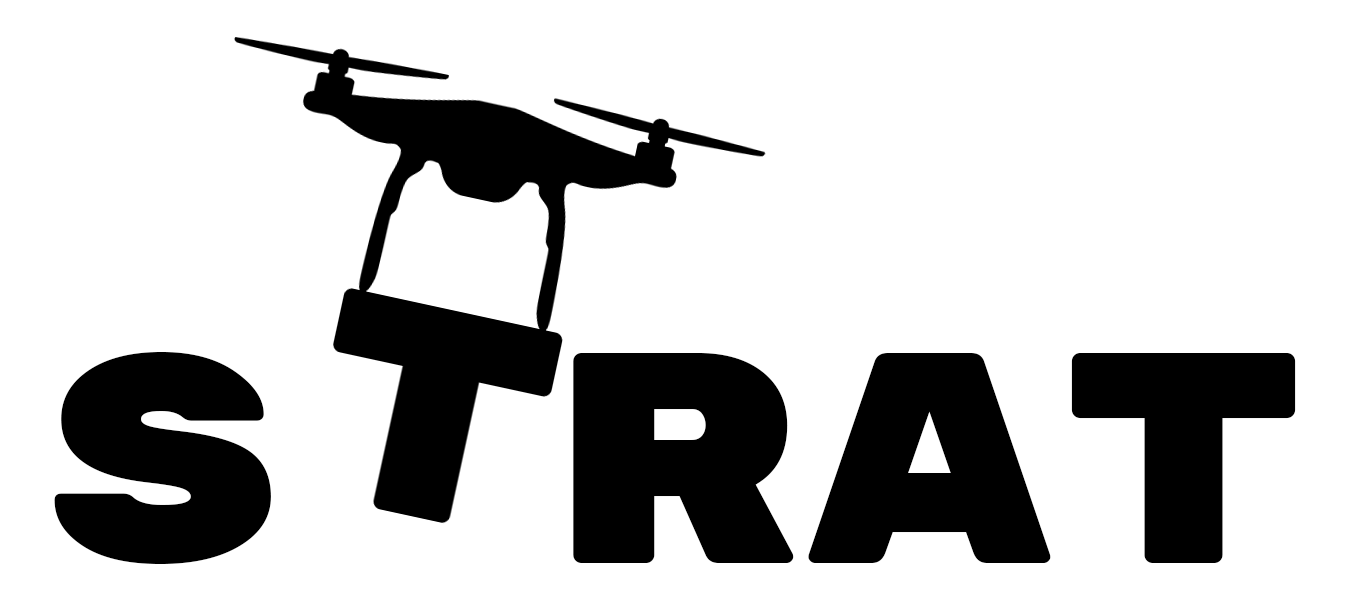
<style>
.page{position:relative;width:1350px;height:600px;background:#ffffff}
.page>*{position:absolute;margin:0}
.t1{font:300px "RubikMonoOne-Regular";color:#000000}
</style>
<div class="page">
<p class="t1" style="left:54px;top:352px;width:1242px;height:212px">S RAT</p>
</div>
